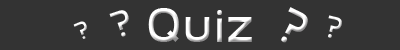
<style>
.page{position:relative;width:400px;height:50px;background:#333333}
.page>*{position:absolute;margin:0}
.t1{font:36px "DroidLogo";color:#ffffff}
.t2{font:48px "DroidLogo";color:#ffffff}
.t3{font:30px "DroidLogo";color:#ffffff}
.t4{font:24px "DroidLogo";color:#ffffff}
</style>
<div class="page">
<p class="t1" style="left:109px;top:10px;width:20px;height:27px;rotate:-19deg">?</p>
<p class="t2" style="left:148px;top:8px;width:104px;height:34px">Quiz</p>
<p class="t2" style="left:281px;top:7px;width:27px;height:36px;rotate:26deg">?</p>
<p class="t3" style="left:328px;top:15px;width:14px;height:23px;rotate:13deg">?</p>
<p class="t4" style="left:73px;top:21px;width:14px;height:18px;rotate:-23deg">?</p>
</div>
